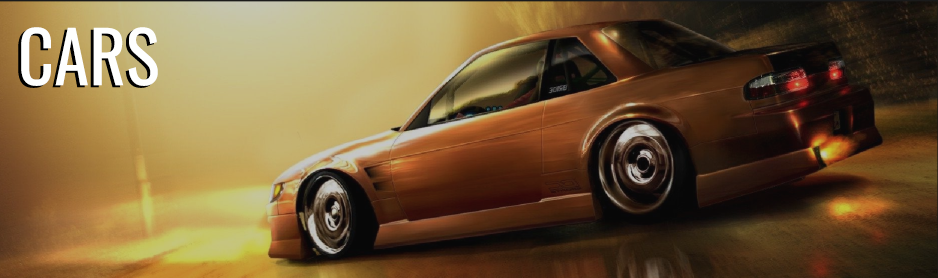
<style>
.page{position:relative;width:938px;height:278px}
.page>*{position:absolute;margin:0}
.t1{font:71px "Oswald-Regular";color:#fefffe;font-weight:bold}
</style>
<div class="page">
<p class="t1" style="left:21px;top:27px;width:137px;height:59px">CARS</p>
</div>
